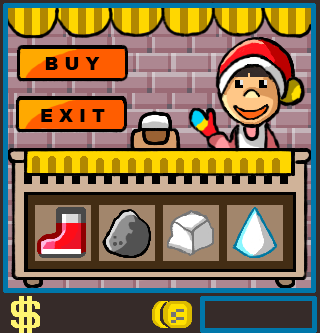
<style>
.page{position:relative;width:320px;height:333px}
.page>*{position:absolute;margin:0}
.t1{font:18px "Arial-Black";color:#000000}
</style>
<div class="page">
<p class="t1" style="left:45px;top:57px;width:55px;height:13px">B U Y</p>
<p class="t1" style="left:41px;top:109px;width:64px;height:13px">E X I T</p>
</div>
